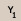
<style>
.page{position:relative;width:21px;height:21px;background:#d9cdc1}
.page>*{position:absolute;margin:0}
.t1{font:9px "Tahoma";color:#000000}
.t2{font:8px "Tahoma";color:#000000}
</style>
<div class="page">
<p class="t1" style="left:7px;top:6px;width:7px;height:7px">Y</p>
<p class="t2" style="left:12px;top:12px;width:4px;height:6px">1</p>
</div>
